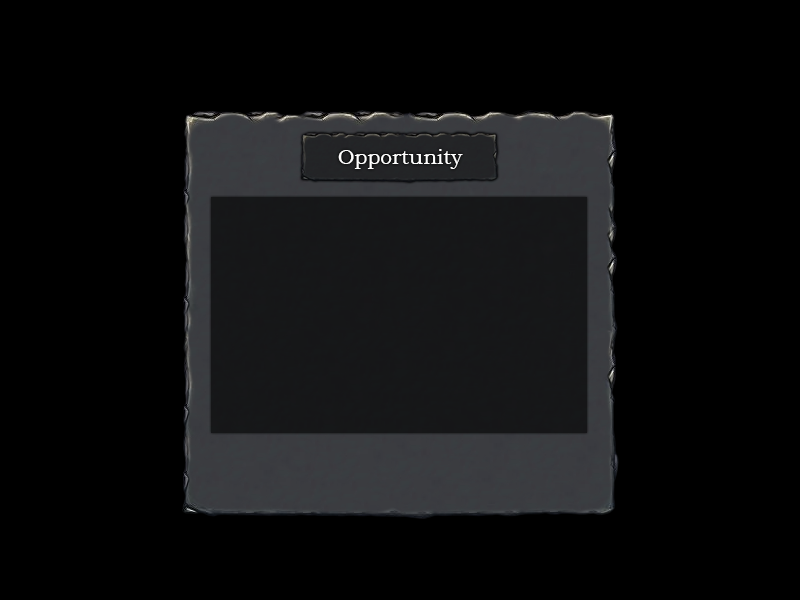
<style>
.page{position:relative;width:800px;height:600px;background:#000000}
.page>*{position:absolute;margin:0}
.t1{font:20.8px "BookmanOldStyle";color:#ffffff}
</style>
<div class="page">
<p class="t1" style="left:338px;top:149px;width:125px;height:20px">Opportunity</p>
</div>
